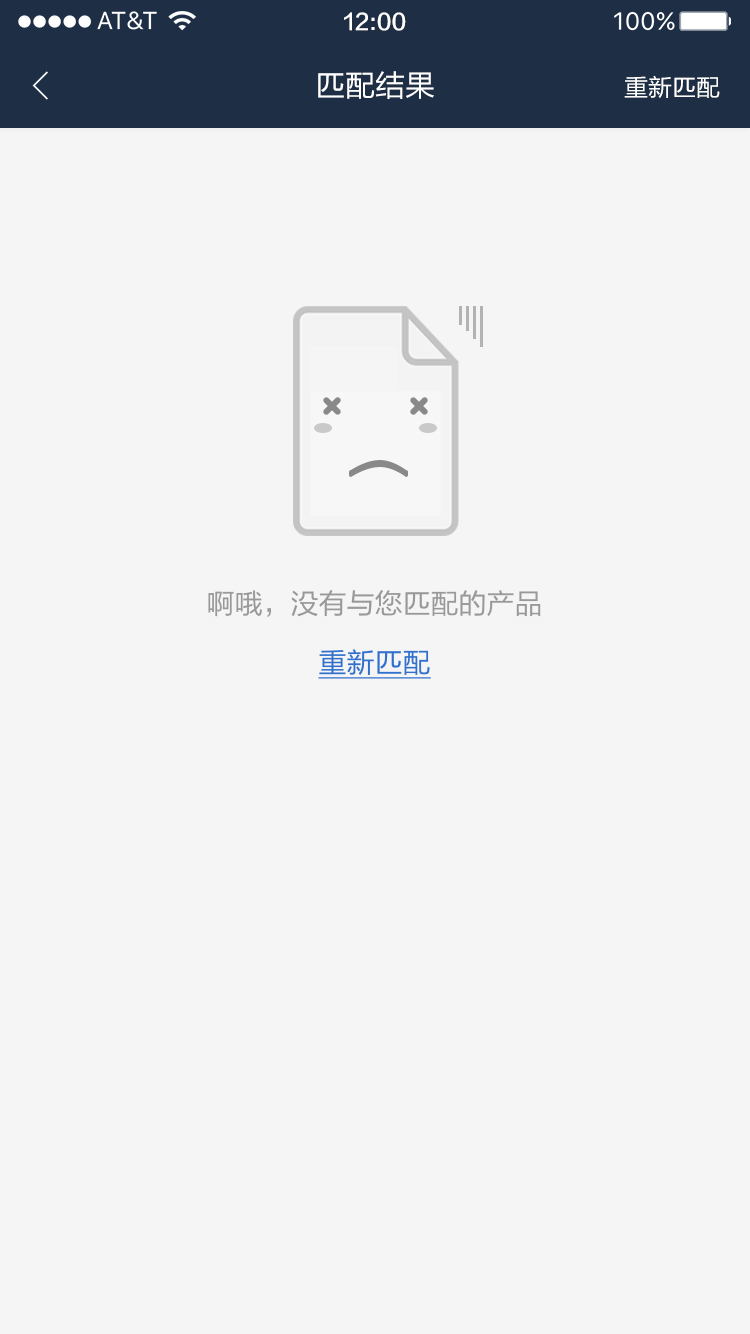
<style>
.page{position:relative;width:750px;height:1334px;background:#f5f5f5}
.page>*{position:absolute;margin:0}
.t1{font:22px "FZLTZHK--GBK1-0";color:#ffffff}
.t2{font:30px "FZLTHJW--GB1-0";color:#ffffff}
.t3{font:24px "FZLTHJW--GB1-0";color:#ffffff}
.t4{font:28px "FZLTHK--GBK1-0";color:#999999}
.t5{font:28px "FZLTHK--GBK1-0";color:#3170cc;text-decoration:underline}
</style>
<div class="page">
<p class="t1" style="left:344px;top:12px;width:62px;height:19px">12:00</p>
<p class="t2" style="left:318px;top:71px;width:116px;height:28px">匹配结果</p>
<p class="t3" style="left:624px;top:75px;width:96px;height:23px">重新匹配</p>
<p class="t4" style="left:208px;top:590px;width:333px;height:27px">啊哦，没有与您匹配的产品</p>
<p class="t5" style="left:318px;top:649px;width:113px;height:30px">重新匹配</p>
</div>
